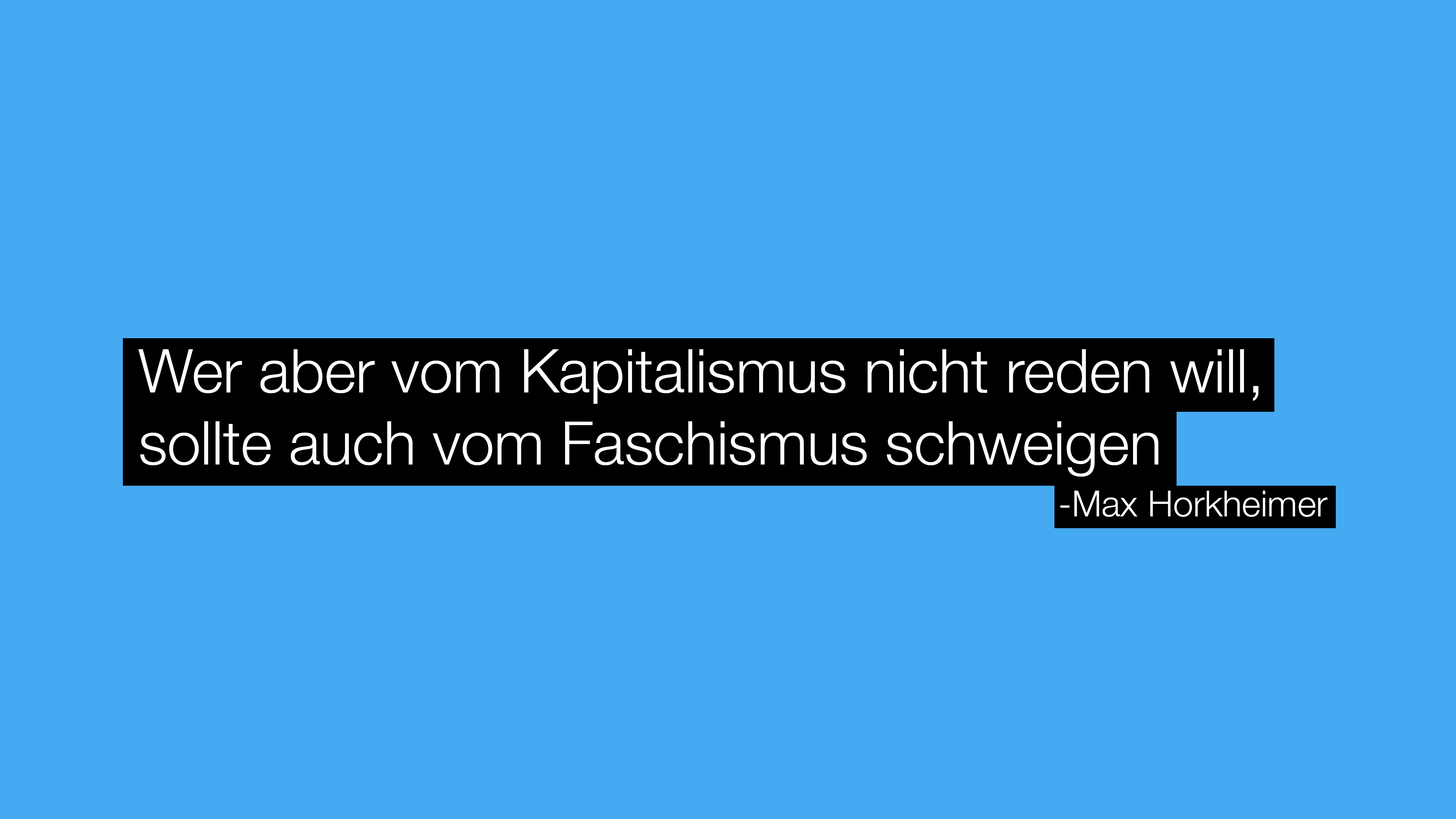
<style>
.page{position:relative;width:1456px;height:819px;background:#45aaf2}
.page>*{position:absolute;margin:0}
.t1{font:60.2px "HelveticaNeue-Light";color:#ffffff}
.t2{font:36.1px "HelveticaNeue-Light";color:#ffffff}
</style>
<div class="page">
<p class="t1" style="left:138px;top:349px;width:1120px;height:128px">Wer aber vom Kapitalismus nicht reden will,<br>sollte auch vom Faschismus schweigen</p>
<p class="t2" style="left:1060px;top:491px;width:267px;height:26px">-Max Horkheimer</p>
</div>
